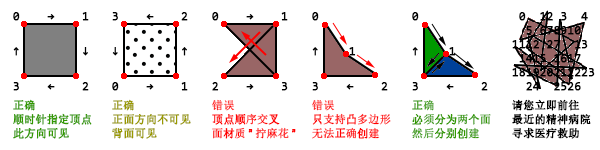
<style>
.page{position:relative;width:600px;height:150px;background:#ffffff}
.page>*{position:absolute;margin:0}
.t1{font:11px/14px "SimSun";color:#339900;font-weight:bold}
.t2{font:12px/35px "Consolas";letter-spacing:2.3em;color:#000000;font-weight:bold}
.t3{font:12px/20px "Consolas";letter-spacing:2.3em;color:#000000;font-weight:bold}
.t4{font:11px/14px "SimSun";color:#999900;font-weight:bold}
.t5{font:11px/14px "SimSun";color:#ff0000;font-weight:bold}
.t6{font:11px/14px "ArialMT";color:#ff0000;font-weight:bold}
.t7{font:12px/35px "Consolas";letter-spacing:2.5em;color:#000000;font-weight:bold}
.t8{font:12px/14px "Consolas";color:#000000;font-weight:bold}
.t9{font:12px/20px "Consolas";color:#000000;font-weight:bold}
.t10{font:11px/14px "SimSun";color:#000000;font-weight:bold}
</style>
<div class="page">
<p class="t1" style="left:13px;top:12px;width:79px;height:127px"><span class="t2">0→1<br>↑ ↓<br></span><span class="t3">3←2<br></span>正确<br>顺时针指定顶点<br>此方向可见</p>
<p class="t4" style="left:112px;top:12px;width:79px;height:127px"><span class="t2">3←2<br>↓ ↑<br></span><span class="t3">0→1<br></span>正确<br>正面方向不可见<br>背面可见</p>
<p class="t5" style="left:212px;top:12px;width:84px;height:127px"><span class="t2">0→1<br><br></span><span class="t3">2→3<br></span>错误<br>顶点顺序交叉<br>面材质<span class="t6">”</span>拧麻花<span class="t6">”</span></p>
<p class="t5" style="left:312px;top:12px;width:79px;height:127px"><span class="t2">0<br></span><span class="t7">↑</span><span class="t2">1<br></span><span class="t3">3←2<br></span>错误<br>只支持凸多边形<br>无法正确创建</p>
<p class="t1" style="left:412px;top:12px;width:79px;height:127px"><span class="t2">0<br></span><span class="t7">↑</span><span class="t2">1<br></span><span class="t3">3←2<br></span>正确<br>必须分为两个面<br>然后分别创建</p>
<p class="t8" style="left:512px;top:12px;width:83px;height:127px">0  12 3  4<br>  5 678910<br>1112 27  13<br> 1415 1617<br>181920212223<br><span class="t9">  24  2526<br></span><span class="t10">请您立即前往<br>最近的精神病院<br>寻求医疗救助</span></p>
</div>
